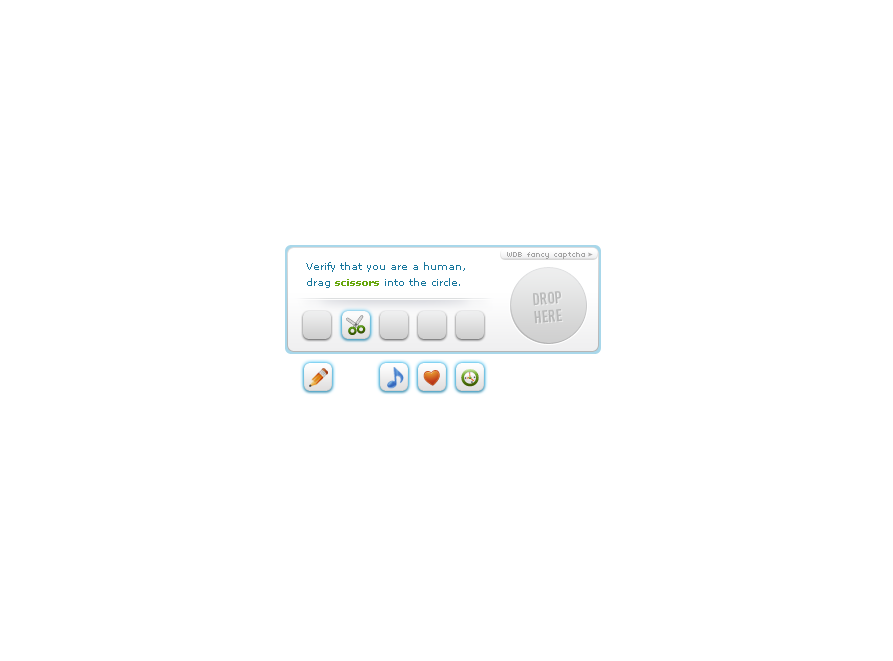
<style>
.page{position:relative;width:893px;height:661px;background:#ffffff}
.page>*{position:absolute;margin:0}
.t1{font:8px "04b03";color:#a4a4a4}
.t2{font:10px/16px "Verdana";color:#18779d}
.t3{font:10px/16px "Verdana-Bold";color:#66a70b}
</style>
<div class="page">
<p class="t1" style="left:507px;top:252px;width:78px;height:7px">WDB fancy captcha</p>
<p class="t2" style="left:306px;top:262px;width:159px;height:26px">Verify that you are a human,<br>drag <span class="t3">scissors</span> into the circle.</p>
</div>
